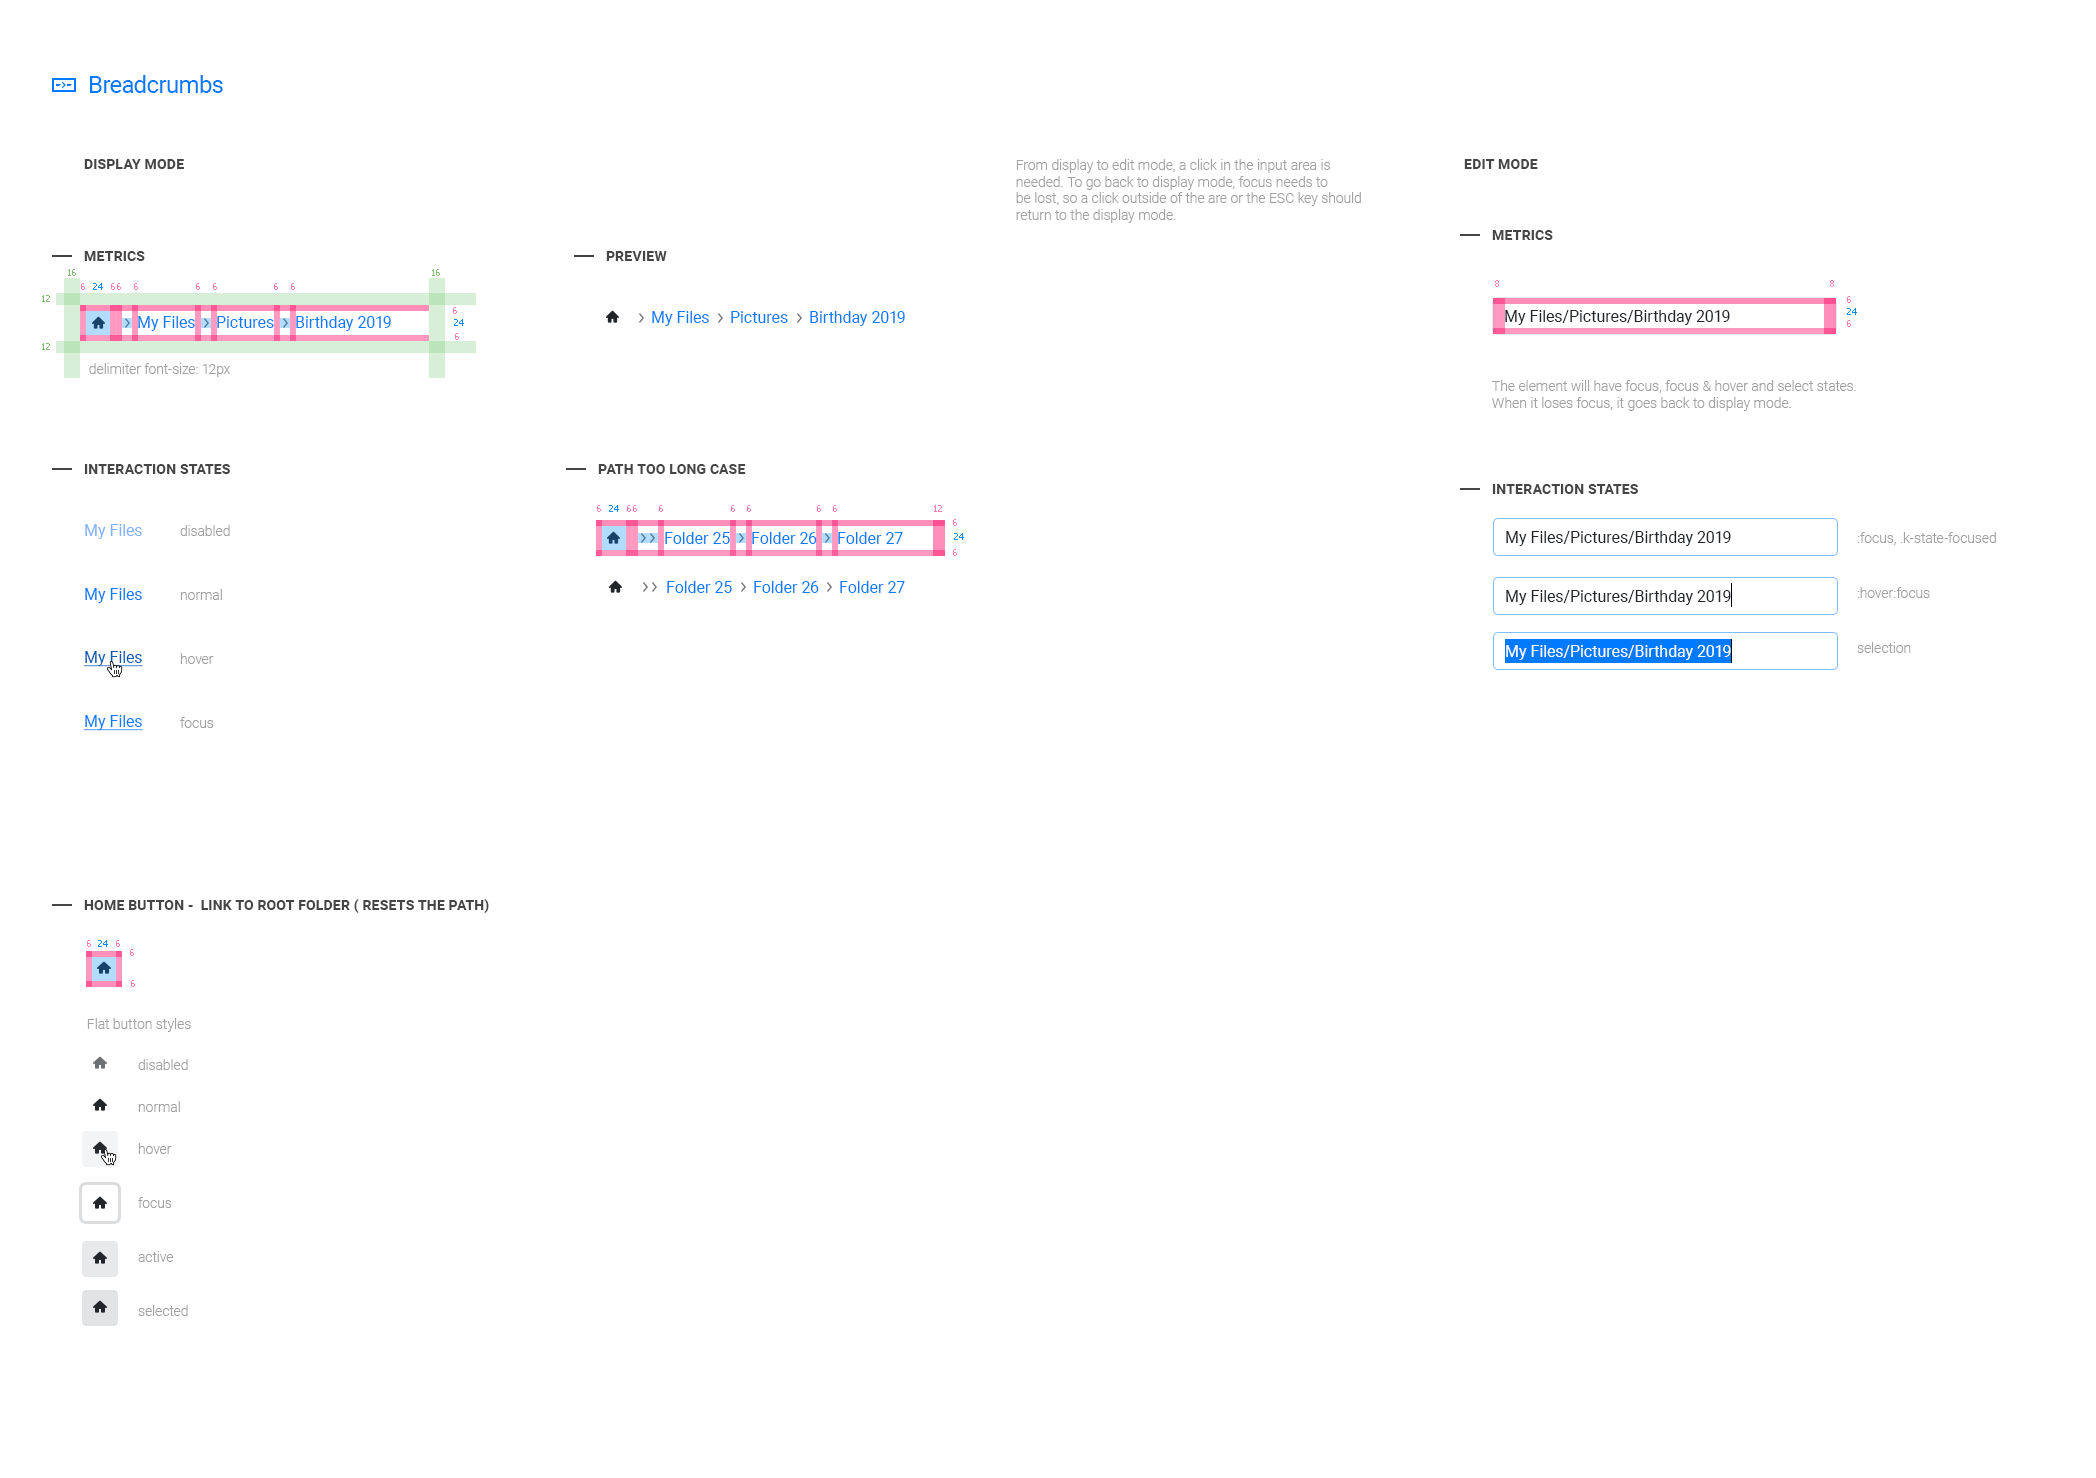
<style>
.page{position:relative;width:2096px;height:1478px;background:#ffffff}
.page>*{position:absolute;margin:0}
.t1{font:24px "Roboto-Regular";letter-spacing:-0.025em;color:#007bff}
.t2{font:14px "Roboto-Bold";letter-spacing:0.01em;color:#454545;text-transform:uppercase}
.t3{font:14px "Roboto-Light";color:#a1a1a1}
.t4{font:9px "Tahoma";color:#80bd70}
.t5{font:9px "Tahoma";color:#ff7cae}
.t6{font:9px "Tahoma";color:#008aff}
.t7{font:16px "Roboto-Regular";color:#007bff}
.t8{font:16px "Roboto-Regular";color:#212529}
.t9{font:16px "Roboto-Regular";color:#80b0ff}
.t10{font:14px/64px "Roboto-Light";color:#a1a1a1}
.t11{font:14px/55px "Roboto-Light";color:#a1a1a1}
.t12{font:16px "Roboto-Regular";color:#0056b3;text-decoration:underline}
.t13{font:16px "Roboto-Regular";color:#ffffff}
.t14{font:16px "Roboto-Regular";color:#007bff;text-decoration:underline}
.t15{font:14px/42px "Roboto-Light";color:#a1a1a1}
.t16{font:14px/54px "Roboto-Light";color:#a1a1a1}
</style>
<div class="page">
<p class="t1" style="left:90px;top:75px;width:133px;height:18px">Breadcrumbs</p>
<p class="t2" style="left:84px;top:159px;width:100px;height:10px">display mode</p>
<p class="t3" style="left:1016px;top:159px;width:345px;height:64px">From display to edit mode, a click in the input area is <br>needed. To go back to display mode, focus needs to <br>be lost, so a click outside of the are or the ESC key should<br>return to the display mode.</p>
<p class="t2" style="left:1464px;top:159px;width:74px;height:10px">edit mode</p>
<p class="t2" style="left:1492px;top:230px;width:61px;height:10px">Metrics</p>
<p class="t2" style="left:84px;top:251px;width:61px;height:10px">Metrics</p>
<p class="t2" style="left:606px;top:251px;width:61px;height:10px">preview</p>
<p class="t4" style="left:68px;top:269px;width:8px;height:7px">16</p>
<p class="t4" style="left:432px;top:269px;width:8px;height:7px">16</p>
<p class="t5" style="left:1495px;top:280px;width:4px;height:7px">8</p>
<p class="t5" style="left:1830px;top:280px;width:4px;height:7px">8</p>
<p class="t5" style="left:81px;top:283px;width:4px;height:7px">6</p>
<p class="t6" style="left:93px;top:283px;width:10px;height:7px">24</p>
<p class="t5" style="left:111px;top:283px;width:4px;height:7px">6</p>
<p class="t5" style="left:117px;top:283px;width:4px;height:7px">6</p>
<p class="t5" style="left:134px;top:283px;width:4px;height:7px">6</p>
<p class="t5" style="left:196px;top:283px;width:4px;height:7px">6</p>
<p class="t5" style="left:213px;top:283px;width:4px;height:7px">6</p>
<p class="t5" style="left:274px;top:283px;width:4px;height:7px">6</p>
<p class="t5" style="left:291px;top:283px;width:4px;height:7px">6</p>
<p class="t4" style="left:42px;top:295px;width:8px;height:7px">12</p>
<p class="t5" style="left:1847px;top:296px;width:4px;height:7px">6</p>
<p class="t7" style="left:138px;top:316px;width:57px;height:15px">My Files</p>
<p class="t7" style="left:217px;top:316px;width:57px;height:12px">Pictures</p>
<p class="t7" style="left:296px;top:316px;width:95px;height:15px">Birthday 2019</p>
<p class="t5" style="left:453px;top:307px;width:4px;height:7px">6</p>
<p class="t7" style="left:652px;top:311px;width:57px;height:15px">My Files</p>
<p class="t7" style="left:731px;top:311px;width:57px;height:12px">Pictures</p>
<p class="t7" style="left:810px;top:311px;width:95px;height:15px">Birthday 2019</p>
<p class="t8" style="left:1505px;top:310px;width:225px;height:15px">My Files/Pictures/Birthday 2019</p>
<p class="t6" style="left:1847px;top:308px;width:10px;height:7px">24</p>
<p class="t6" style="left:454px;top:319px;width:10px;height:7px">24</p>
<p class="t5" style="left:1847px;top:320px;width:4px;height:7px">6</p>
<p class="t5" style="left:455px;top:333px;width:4px;height:7px">6</p>
<p class="t4" style="left:42px;top:343px;width:8px;height:7px">12</p>
<p class="t3" style="left:89px;top:363px;width:142px;height:14px">delimiter font-size: 12px</p>
<p class="t3" style="left:1492px;top:380px;width:364px;height:31px">The element will have focus, focus &amp; hover and select states.<br>When it loses focus, it goes back to display mode.</p>
<p class="t2" style="left:84px;top:464px;width:146px;height:10px">interaction states</p>
<p class="t2" style="left:598px;top:464px;width:148px;height:10px">Path too long case</p>
<p class="t2" style="left:1492px;top:484px;width:146px;height:10px">interaction states</p>
<p class="t5" style="left:597px;top:505px;width:4px;height:7px">6</p>
<p class="t6" style="left:609px;top:505px;width:10px;height:7px">24</p>
<p class="t5" style="left:627px;top:505px;width:4px;height:7px">6</p>
<p class="t5" style="left:633px;top:505px;width:4px;height:7px">6</p>
<p class="t5" style="left:659px;top:505px;width:4px;height:7px">6</p>
<p class="t5" style="left:731px;top:505px;width:4px;height:7px">6</p>
<p class="t5" style="left:747px;top:505px;width:4px;height:7px">6</p>
<p class="t5" style="left:817px;top:505px;width:4px;height:7px">6</p>
<p class="t5" style="left:833px;top:505px;width:4px;height:7px">6</p>
<p class="t5" style="left:934px;top:505px;width:8px;height:7px">12</p>
<p class="t5" style="left:953px;top:519px;width:4px;height:7px">6</p>
<p class="t9" style="left:85px;top:524px;width:57px;height:15px">My Files</p>
<p class="t10" style="left:180px;top:525px;width:50px;height:203px">disabled<br>normal<br>hover<br>focus</p>
<p class="t7" style="left:665px;top:532px;width:65px;height:12px">Folder 25</p>
<p class="t7" style="left:752px;top:532px;width:65px;height:12px">Folder 26</p>
<p class="t7" style="left:838px;top:532px;width:65px;height:12px">Folder 27</p>
<p class="t6" style="left:954px;top:533px;width:10px;height:7px">24</p>
<p class="t8" style="left:1506px;top:531px;width:225px;height:15px">My Files/Pictures/Birthday 2019</p>
<p class="t11" style="left:1857px;top:532px;width:139px;height:121px">:focus, .k-state-focused<br>:hover:focus<br>selection</p>
<p class="t5" style="left:953px;top:549px;width:4px;height:7px">6</p>
<p class="t7" style="left:667px;top:581px;width:65px;height:12px">Folder 25</p>
<p class="t7" style="left:754px;top:581px;width:65px;height:12px">Folder 26</p>
<p class="t7" style="left:840px;top:581px;width:65px;height:12px">Folder 27</p>
<p class="t7" style="left:85px;top:588px;width:57px;height:15px">My Files</p>
<p class="t8" style="left:1506px;top:590px;width:225px;height:15px">My Files/Pictures/Birthday 2019</p>
<p class="t12" style="left:84px;top:651px;width:59px;height:16px">My Files</p>
<p class="t13" style="left:1506px;top:645px;width:225px;height:15px">My Files/Pictures/Birthday 2019</p>
<p class="t14" style="left:84px;top:715px;width:59px;height:16px">My Files</p>
<p class="t2" style="left:84px;top:899px;width:405px;height:14px">home button -  link to root folder ( resets the path)</p>
<p class="t5" style="left:87px;top:940px;width:4px;height:7px">6</p>
<p class="t6" style="left:98px;top:940px;width:10px;height:7px">24</p>
<p class="t5" style="left:116px;top:940px;width:4px;height:7px">6</p>
<p class="t5" style="left:130px;top:949px;width:4px;height:7px">6</p>
<p class="t5" style="left:131px;top:980px;width:4px;height:7px">6</p>
<p class="t3" style="left:87px;top:1018px;width:104px;height:14px">Flat button styles</p>
<p class="t15" style="left:138px;top:1059px;width:50px;height:257px">disabled<br>normal<br>hover<br><span class="t16">focus<br>active<br>selected</span></p>
</div>
